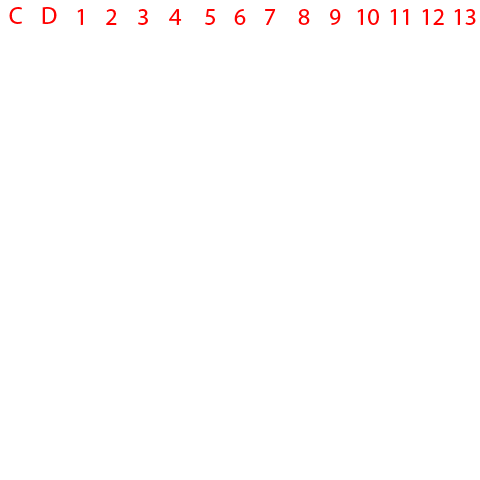
<style>
.page{position:relative;width:480px;height:480px;background:#ffffff}
.page>*{position:absolute;margin:0}
.t1{font:24px "MyriadPro-Regular";color:#ff0000}
</style>
<div class="page">
<p class="t1" style="left:9px;top:7px;width:13px;height:17px">C</p>
<p class="t1" style="left:42px;top:7px;width:15px;height:17px">D</p>
<p class="t1" style="left:77px;top:9px;width:6px;height:16px">1</p>
<p class="t1" style="left:106px;top:9px;width:11px;height:16px">2</p>
<p class="t1" style="left:138px;top:9px;width:10px;height:16px">3</p>
<p class="t1" style="left:169px;top:9px;width:13px;height:16px">4</p>
<p class="t1" style="left:205px;top:9px;width:10px;height:16px">5</p>
<p class="t1" style="left:234px;top:9px;width:12px;height:16px">6</p>
<p class="t1" style="left:265px;top:9px;width:11px;height:16px">7</p>
<p class="t1" style="left:298px;top:9px;width:12px;height:16px">8</p>
<p class="t1" style="left:330px;top:9px;width:11px;height:16px">9</p>
<p class="t1" style="left:357px;top:9px;width:22px;height:16px">10</p>
<p class="t1" style="left:390px;top:9px;width:19px;height:16px">11</p>
<p class="t1" style="left:422px;top:9px;width:22px;height:16px">12</p>
<p class="t1" style="left:454px;top:9px;width:22px;height:16px">13</p>
</div>
